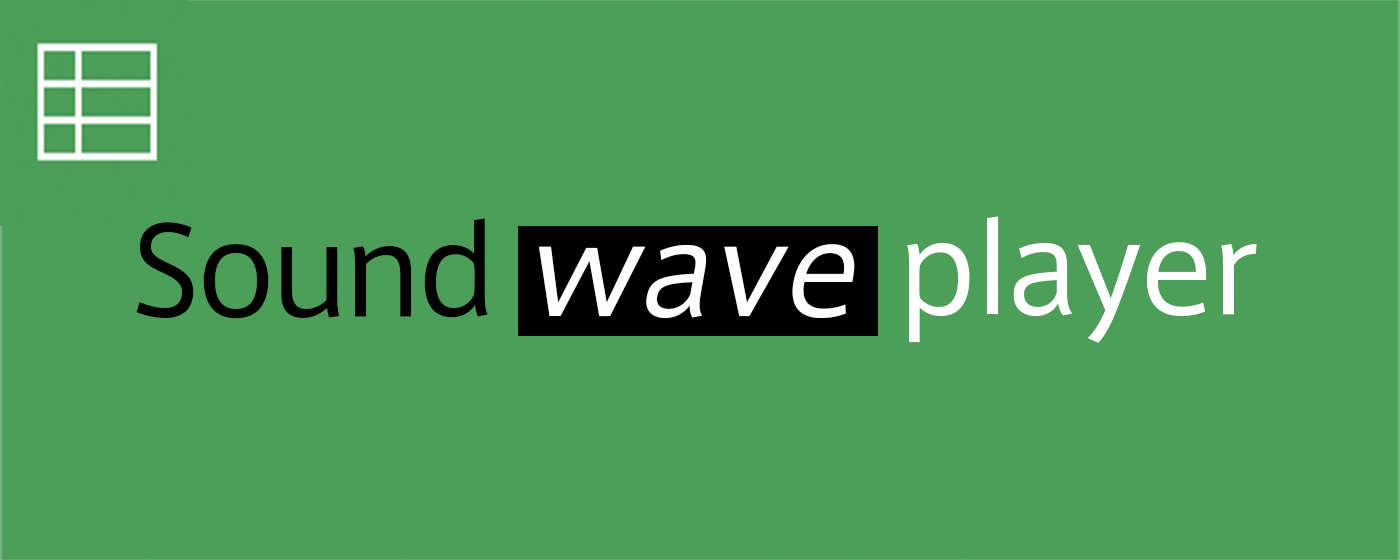
<style>
.page{position:relative;width:1400px;height:560px;background:#4c9e59}
.page>*{position:absolute;margin:0}
.t1{font:120px "AxisStd-Regular";color:#000000}
.t2{font:120px "AxisStd-Regular";color:#ffffff}
.t3{font:120px "AxisStd-Regular";color:#fefefe;font-style:italic}
</style>
<div class="page">
<p class="t1" style="left:136px;top:218px;width:352px;height:101px">Sound</p>
<p class="t2" style="left:907px;top:216px;width:350px;height:127px">player</p>
<p class="t3" style="left:539px;top:244px;width:316px;height:75px">wave</p>
</div>
